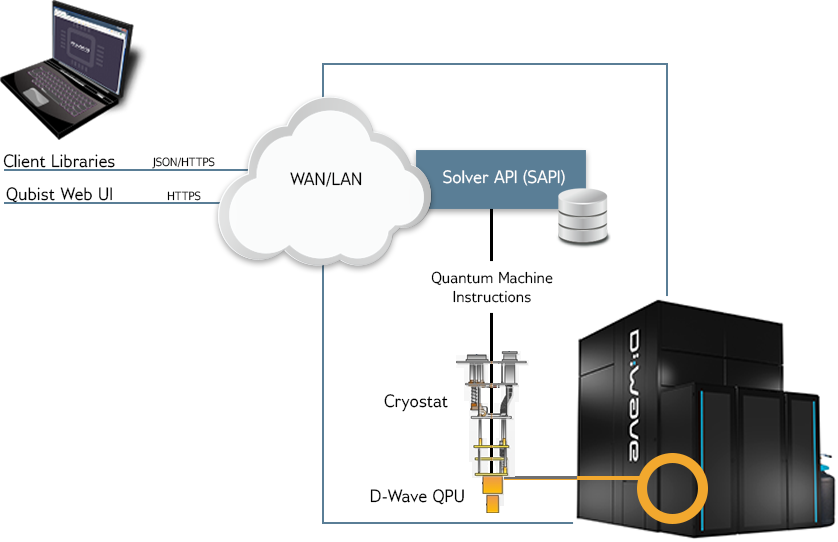
<style>
.page{position:relative;width:838px;height:542px;background:#ffffff}
.page>*{position:absolute;margin:0}
.t1{font:18px "GilliusADFNo2-Regular";color:#000000}
.t2{font:12px "GilliusADFNo2-Regular";color:#000000}
.t3{font:18px "GilliusADFNo2-Regular";color:#ffffff}
.t4{font:16px "GilliusADFNo2-Regular";color:#000000}
</style>
<div class="page">
<p class="t1" style="left:3px;top:154px;width:112px;height:14px">Client Libraries</p>
<p class="t2" style="left:152px;top:157px;width:63px;height:12px">JSON/HTTPS</p>
<p class="t1" style="left:290px;top:172px;width:72px;height:15px">WAN/LAN</p>
<p class="t3" style="left:443px;top:169px;width:122px;height:17px">Solver API (SAPI)</p>
<p class="t1" style="left:6px;top:187px;width:106px;height:16px">Qubist Web UI</p>
<p class="t2" style="left:167px;top:191px;width:34px;height:10px">HTTPS</p>
<p class="t4" style="left:431px;top:271px;width:122px;height:32px;text-align:center">Quantum Machine<br>Instructions</p>
<p class="t1" style="left:384px;top:394px;width:64px;height:18px">Cryostat</p>
<p class="t1" style="left:370px;top:489px;width:94px;height:16px">D-Wave QPU</p>
</div>
